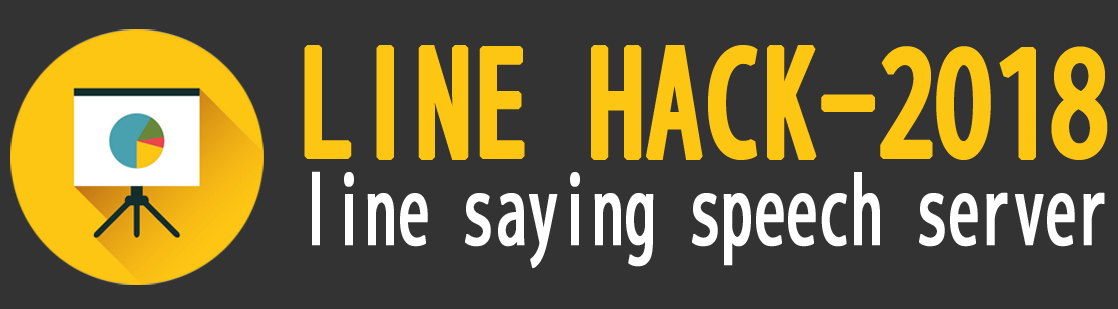
<style>
.page{position:relative;width:1118px;height:309px;background:#333333}
.page>*{position:absolute;margin:0}
.t1{font:139.5px "AdobeFanHeitiStd-Bold";color:#fdc613;font-weight:bold;scale:0.79 1}
.t2{font:90.9px "AdobeFanHeitiStd-Bold";color:#ffffff;font-weight:bold;scale:0.68 1}
</style>
<div class="page">
<p class="t1" style="left:304px;top:45px;width:804px;height:115px">LINE HACK-2018</p>
<p class="t2" style="left:312px;top:171px;width:793px;height:97px">line saying speech server</p>
</div>
